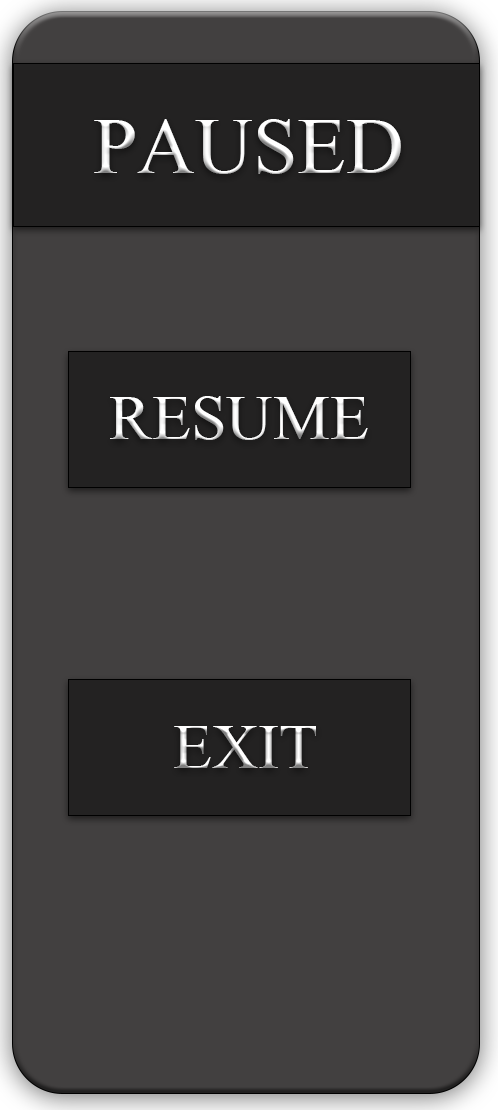
<style>
.page{position:relative;width:498px;height:1110px;background:#424040}
.page>*{position:absolute;margin:0}
.t1{font:80px "MongolianBaiti";color:#ffffff}
.t2{font:64px "MongolianBaiti";color:#ffffff}
.t3{font:64px "MongolianBaiti"}
</style>
<div class="page">
<p class="t1" style="left:94px;top:119px;width:307px;height:55px">PAUSED</p>
<p class="t2" style="left:110px;top:396px;width:258px;height:44px">RESUME</p>
<p class="t3" style="left:174px;top:726px;width:142px;height:42px">EXIT</p>
</div>
